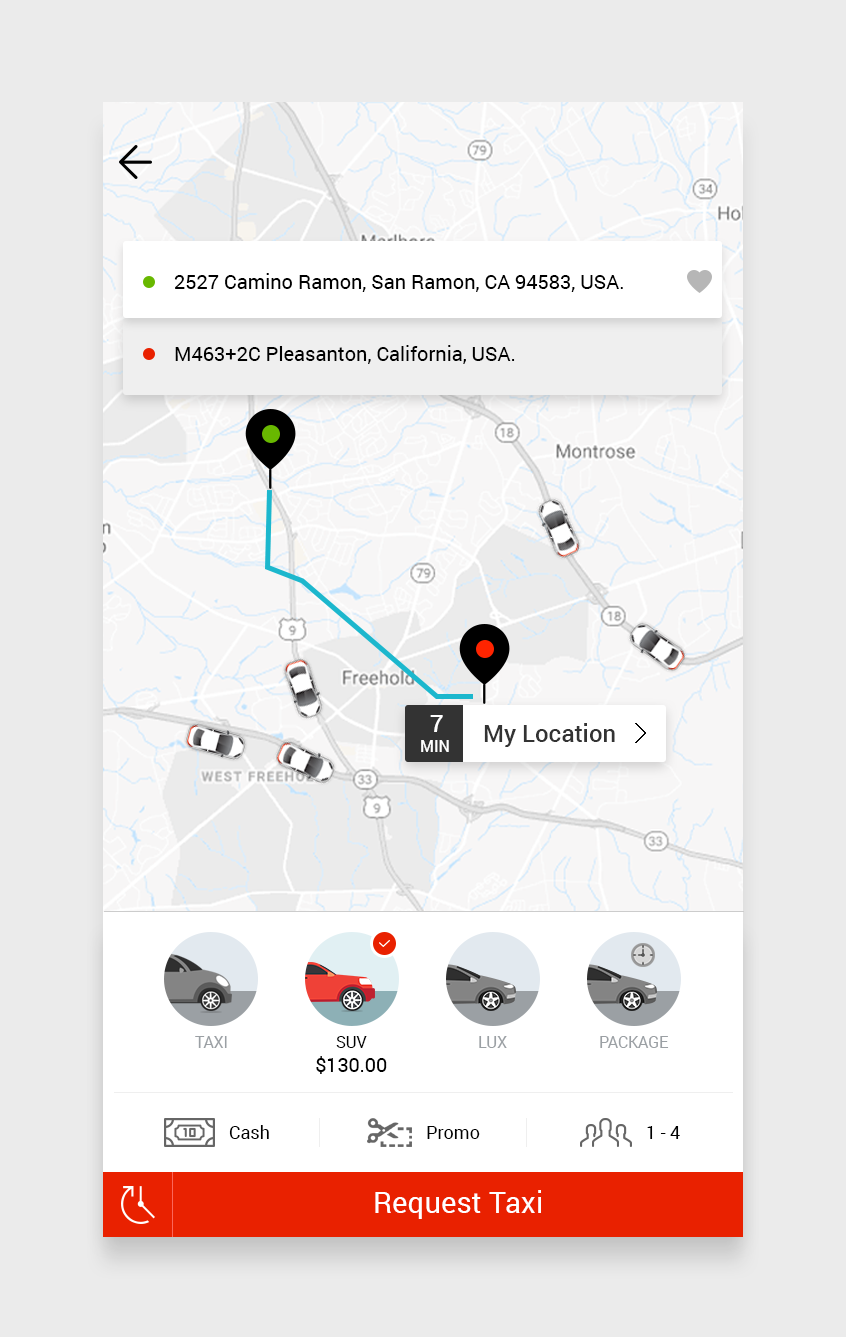
<style>
.page{position:relative;width:846px;height:1337px;background:#ebebeb}
.page>*{position:absolute;margin:0}
.t1{font:20px "Roboto-Regular";color:#000000}
.t2{font:24px "Roboto-Medium";color:#ffffff}
.t3{font:24px "Roboto-Medium";color:#333333}
.t4{font:16px "Roboto-Medium";color:#ffffff}
.t5{font:16px "Roboto-Regular";color:#9ba0a4;text-transform:uppercase}
.t6{font:16px "Roboto-Regular";color:#000000;text-transform:uppercase}
.t7{font:20px "Roboto-Regular";color:#000000;text-transform:uppercase}
.t8{font:18px "Roboto-Regular";color:#000000}
.t9{font:29.2px "Roboto-Regular";color:#ffffff}
</style>
<div class="page">
<p class="t1" style="left:174px;top:273px;width:449px;height:19px">2527 Camino Ramon, San Ramon, CA 94583, USA.</p>
<p class="t1" style="left:175px;top:345px;width:340px;height:19px">M463+2C Pleasanton, California, USA.</p>
<p class="t2" style="left:430px;top:715px;width:13px;height:17px">7</p>
<p class="t3" style="left:484px;top:723px;width:131px;height:24px">My Location</p>
<p class="t4" style="left:421px;top:740px;width:28px;height:12px">MIN</p>
<p class="t5" style="left:195px;top:1036px;width:32px;height:12px">Taxi</p>
<p class="t6" style="left:336px;top:1036px;width:31px;height:12px">suv</p>
<p class="t5" style="left:479px;top:1036px;width:28px;height:12px">lux</p>
<p class="t5" style="left:600px;top:1036px;width:69px;height:12px">package</p>
<p class="t7" style="left:316px;top:1056px;width:71px;height:18px">$130.00</p>
<p class="t8" style="left:229px;top:1125px;width:40px;height:14px">Cash</p>
<p class="t8" style="left:427px;top:1126px;width:53px;height:13px">Promo</p>
<p class="t8" style="left:647px;top:1126px;width:33px;height:13px">1 - 4</p>
<p class="t9" style="left:375px;top:1190px;width:166px;height:29px">Request Taxi</p>
</div>
